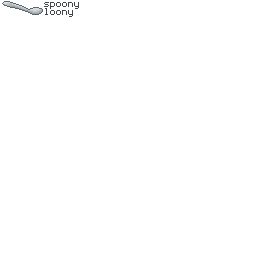
<style>
.page{position:relative;width:256px;height:256px;background:#ffffff}
.page>*{position:absolute;margin:0}
.t1{font:15px "Coder's-Crux";color:#3f494d}
</style>
<div class="page">
<p class="t1" style="left:44px;top:2px;width:35px;height:7px">spoony</p>
<p class="t1" style="left:45px;top:8px;width:28px;height:9px">loony</p>
</div>
